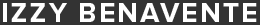
<style>
.page{position:relative;width:260px;height:25px;background:#333333}
.page>*{position:absolute;margin:0}
.t1{font:28px "ProximaNova-Bold";letter-spacing:0.08em;color:#ffffff}
</style>
<div class="page">
<p class="t1" style="left:3px;top:3px;width:254px;height:19px">IZZY BENAVENTE</p>
</div>
